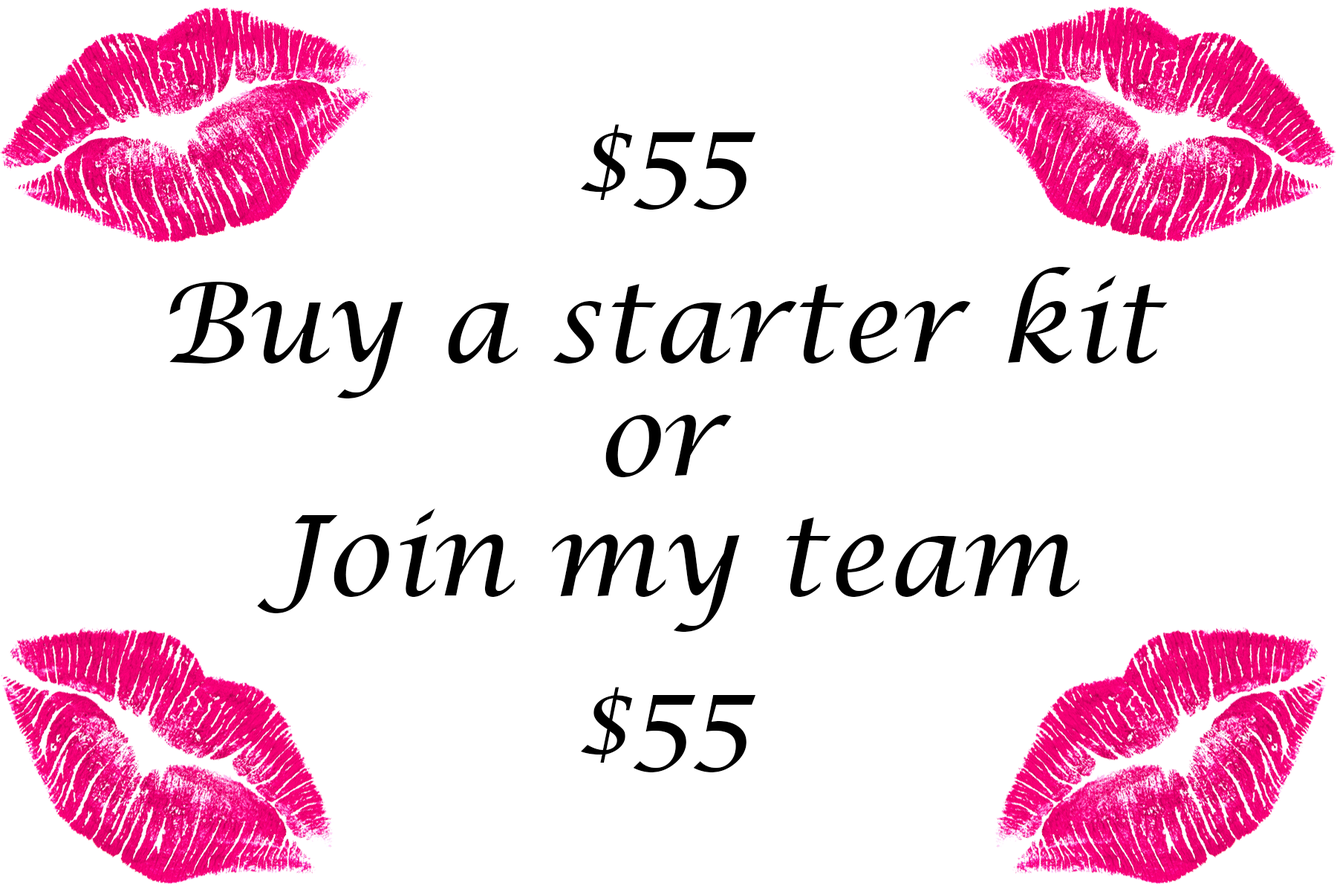
<style>
.page{position:relative;width:1337px;height:892px;background:#ffffff}
.page>*{position:absolute;margin:0}
.t1{font:111.5px "LucidaCalligraphy-Italic";color:#000000}
</style>
<div class="page">
<p class="t1" style="left:580px;top:124px;width:176px;height:86px">$55</p>
<p class="t1" style="left:169px;top:267px;width:999px;height:131px">Buy a starter kit</p>
<p class="t1" style="left:606px;top:415px;width:126px;height:62px">or</p>
<p class="t1" style="left:257px;top:508px;width:823px;height:124px">Join my team</p>
<p class="t1" style="left:580px;top:687px;width:176px;height:85px">$55</p>
</div>
